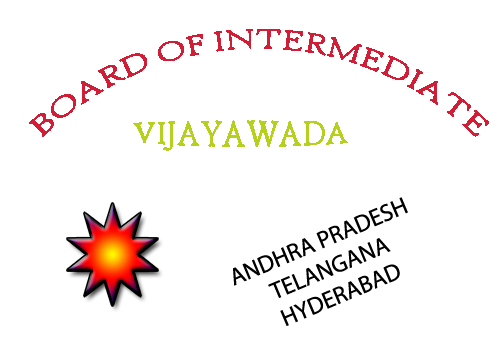
<style>
.page{position:relative;width:504px;height:360px;background:#ffffff}
.page>*{position:absolute;margin:0}
.t1{font:30px "HighTowerText-Reg";color:#d11d35}
.t2{font:30px "HighTowerText-Reg";color:#b5d11d}
.t3{font:24px "Myriad-Roman";color:#000000}
</style>
<div class="page">
<p class="t1" style="left:29px;top:29px;width:460px;height:108px">BOARD OF INTERMEDIATE</p>
<p class="t2" style="left:133px;top:120px;width:215px;height:31px"><span class="t1"><br></span>VIJAYAWADA</p>
<p class="t3" style="left:233px;top:197px;width:175px;height:129px;text-align:center;rotate:-23deg">ANDHRA PRADESH<br>TELANGANA<br>HYDERABAD</p>
</div>
